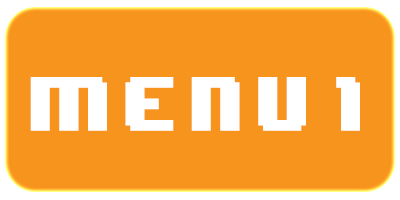
<style>
.page{position:relative;width:400px;height:200px;background:#f7941d}
.page>*{position:absolute;margin:0}
.t1{font:64.3px "8BITWONDERNominal";letter-spacing:0.16em;color:#ffffff;scale:0.89 1}
</style>
<div class="page">
<p class="t1" style="left:30px;top:77px;width:330px;height:54px">Menu 1</p>
</div>
